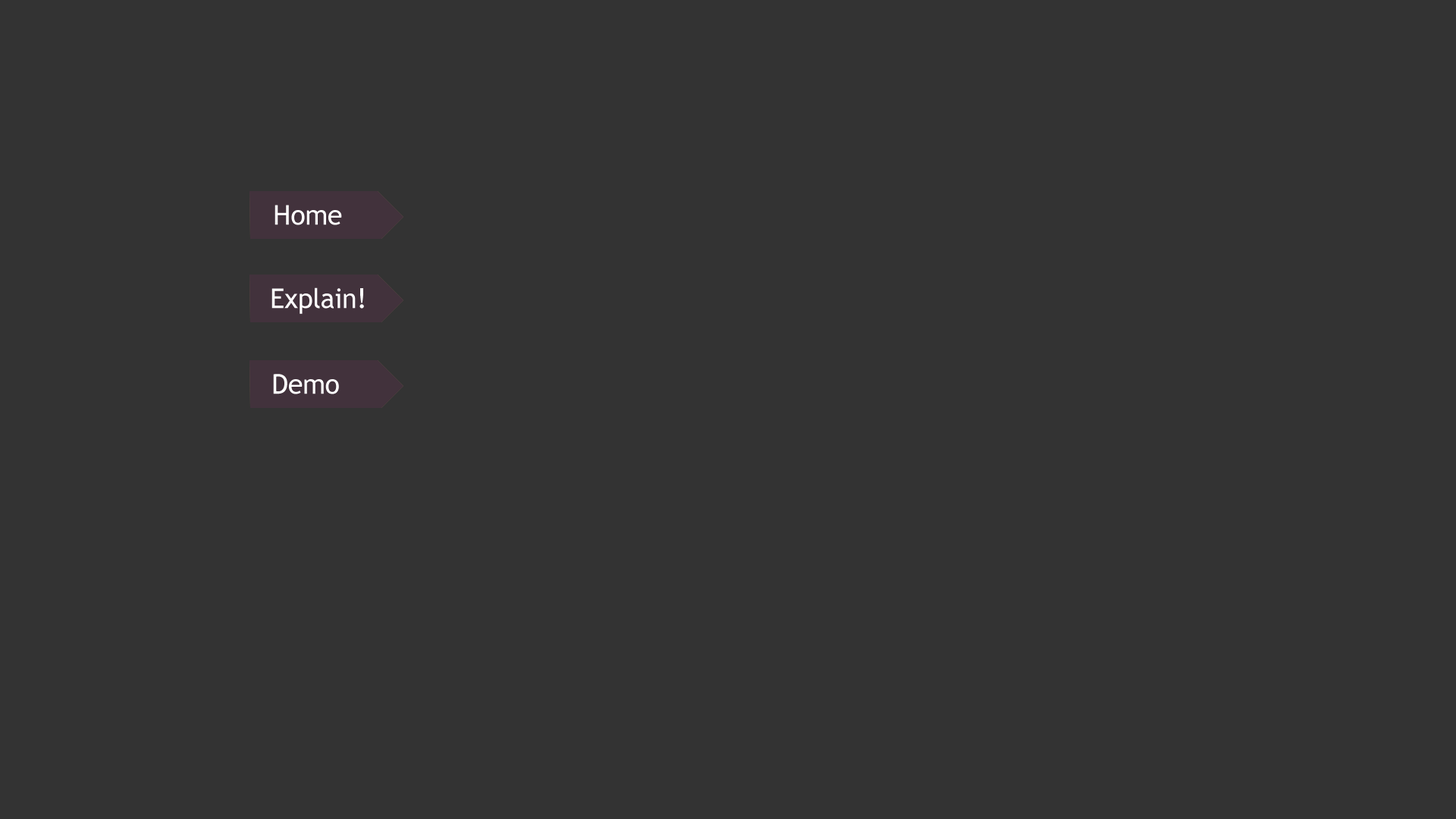
<style>
.page{position:relative;width:1456px;height:819px;background:#333333}
.page>*{position:absolute;margin:0}
.t1{font:27.3px "TrebuchetMS";letter-spacing:-0.01em;color:#ffffff}
</style>
<div class="page">
<p class="t1" style="left:275px;top:205px;width:67px;height:20px">Home</p>
<p class="t1" style="left:271px;top:287px;width:93px;height:27px">Explain!</p>
<p class="t1" style="left:273px;top:374px;width:66px;height:20px">Demo</p>
</div>
